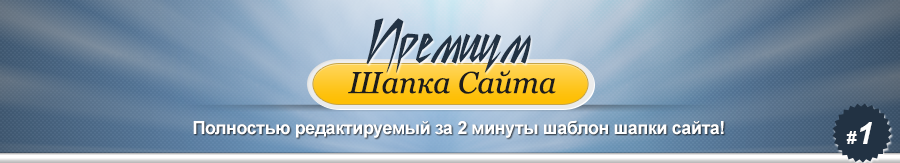
<style>
.page{position:relative;width:900px;height:163px}
.page>*{position:absolute;margin:0}
.t1{font:60px "StillTimeCyr";color:#223243;font-weight:bold}
.t2{font:30.3px "Georgia-Italic";color:#1c1c1c}
.t3{font:18px "Arial-BoldMT";letter-spacing:-0.025em;color:#ffffff}
.t4{font:18px "Arial-BoldItalicMT";letter-spacing:0.025em;color:#fefefe;text-transform:uppercase}
.t5{font:30.4px "Arial-BoldItalicMT";letter-spacing:0.025em;color:#fefefe;text-transform:uppercase}
</style>
<div class="page">
<p class="t1" style="left:366px;top:18px;width:165px;height:55px">Премиум</p>
<p class="t2" style="left:348px;top:70px;width:208px;height:24px">Шапка Сайта</p>
<p class="t3" style="left:193px;top:120px;width:531px;height:18px">Полностью редактируемый за 2 минуты шаблон шапки сайта!</p>
<p class="t4" style="left:846px;top:122px;width:26px;height:22px">#<span class="t5">1</span></p>
</div>
